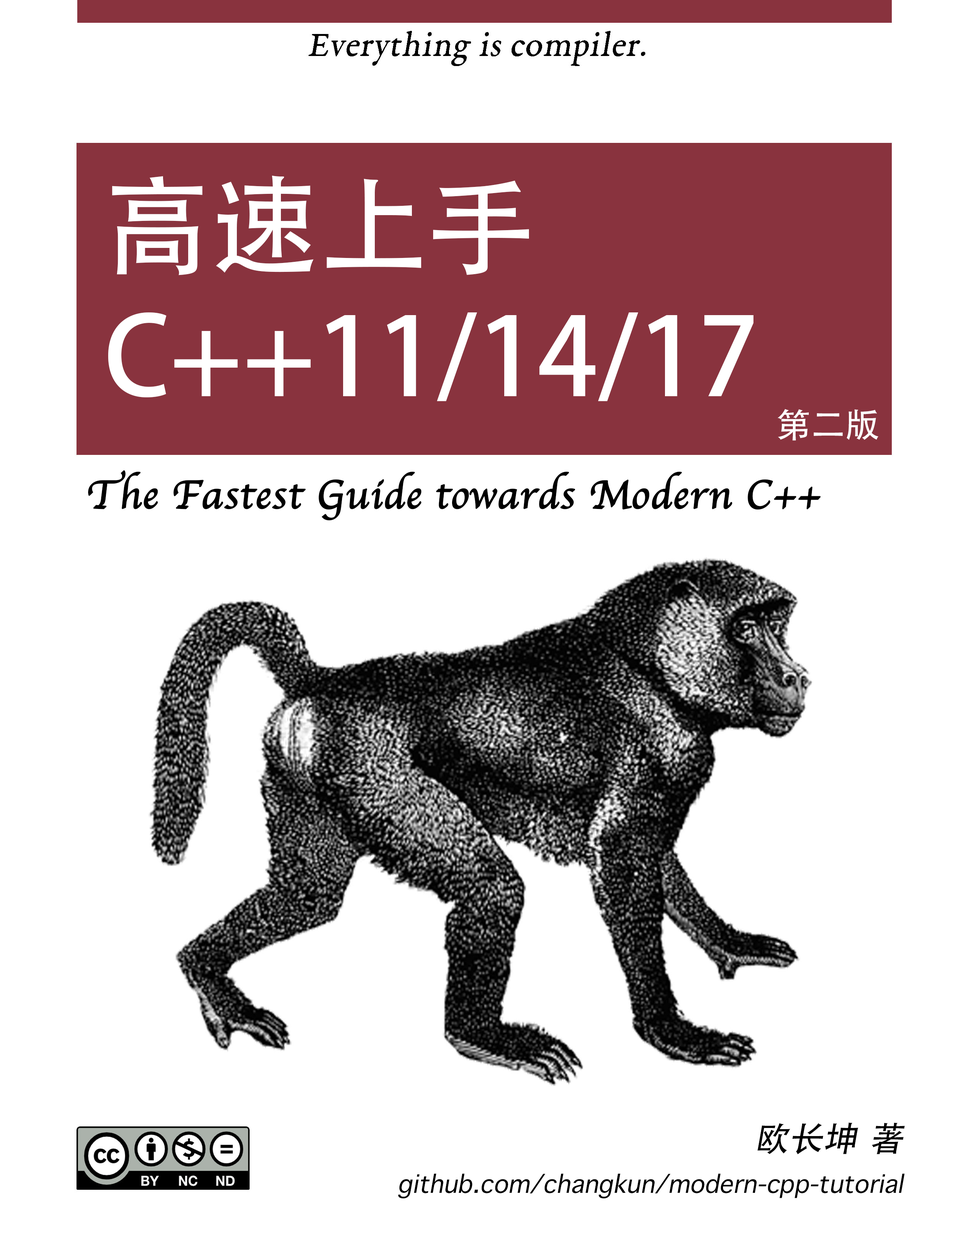
<style>
.page{position:relative;width:954px;height:1250px;background:#ffffff}
.page>*{position:absolute;margin:0}
.t1{font:107.8px "AdobeHeitiStd-Regular";color:#ffffff}
.t2{font:34.4px "AdobeHeitiStd-Regular";color:#fefefe}
.t3{font:41.7px "Apple-Chancery";color:#000000;font-weight:bold}
.t4{font:34.4px "AppleSymbols";color:#000000;font-style:italic}
.t5{font:34.4px "AppleSymbols";color:#000000}
.t6{font:34.4px "AdobeHeitiStd-Regular";color:#000000;font-style:italic}
</style>
<div class="page">
<p class="t1" style="left:108px;top:175px;width:645px;height:226px">高速上手<br>C++11/14/17</p>
<p class="t2" style="left:777px;top:409px;width:101px;height:32px">第二版</p>
<p class="t3" style="left:88px;top:470px;width:732px;height:51px">The Fastest Guide towards Modern C++</p>
<p class="t4" style="left:398px;top:1123px;width:507px;height:76px;text-align:right"><span class="t5"><br></span><span class="t6">欧长坤 著</span><br>github.com/changkun/modern-cpp-tutorial</p>
</div>
